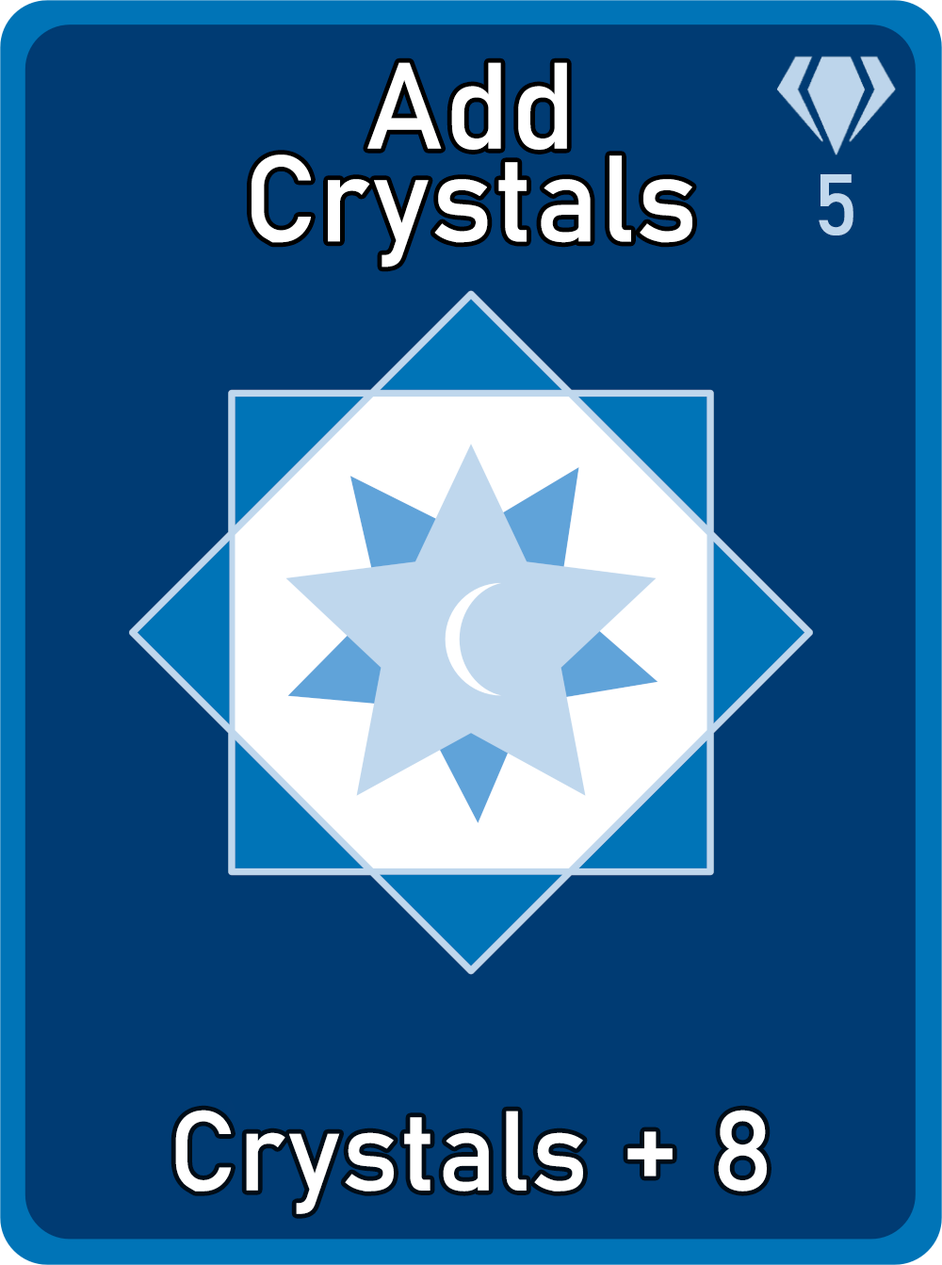
<style>
.page{position:relative;width:942px;height:1265px;background:#003b73}
.page>*{position:absolute;margin:0}
.t1{font:120.6px/92.7px "Bahnschrift";letter-spacing:0.01em;color:#ffffff}
.t2{font:85px "Bahnschrift";letter-spacing:0.01em;color:#c1d8ed}
.t3{font:111.3px "Bahnschrift";letter-spacing:0.01em;color:#ffffff}
</style>
<div class="page">
<p class="t1" style="left:252px;top:62px;width:441px;height:206px;text-align:center">Add<br>Crystals</p>
<p class="t2" style="left:819px;top:174px;width:35px;height:62px">5</p>
<p class="t3" style="left:175px;top:1110px;width:592px;height:105px">Crystals + 8</p>
</div>
